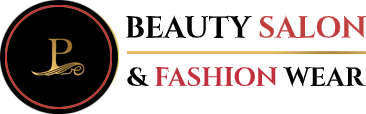
<style>
.page{position:relative;width:366px;height:114px;background:#ffffff}
.page>*{position:absolute;margin:0}
.t1{font:30px "Cinzel-Bold";color:#010101}
.t2{font:30px "Cinzel-Bold";color:#c03f3e}
.t3{font:26px "Cinzel-Bold";color:#bf303c}
.t4{font:26px "Cinzel-Bold";color:#010101}
</style>
<div class="page">
<p class="t1" style="left:125px;top:15px;width:241px;height:23px">BEAUTY <span class="t2">SALON</span></p>
<p class="t3" style="left:127px;top:67px;width:239px;height:20px"><span class="t4">&amp; </span>FASHION <span class="t4">WEAR</span></p>
</div>
